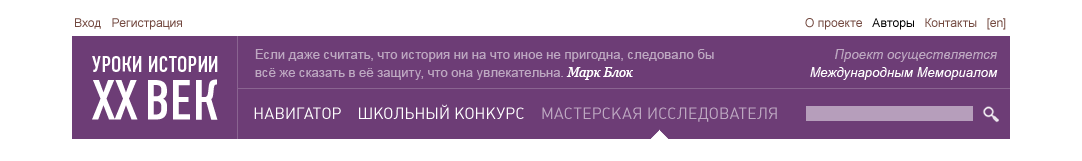
<style>
.page{position:relative;width:1082px;height:161px;background:#6d3d76}
.page>*{position:absolute;margin:0}
.t1{font:12px "ArialMT";color:#734940}
.t2{font:12px "ArialMT";color:#000000}
.t3{font:13px/18px "ArialMT";color:#bda8c1}
.t4{font:13px/18px "Georgia-Italic";color:#bda8c1}
.t5{font:13px "Arial-ItalicMT";color:#bda8c1}
.t6{font:22.2px "DINCondensedC-Regular";color:#ffffff}
.t7{font:13px "Georgia-Italic";color:#ffffff}
.t8{font:13px "Arial-ItalicMT";color:#ffffff}
.t9{font:56.5px "DINCondensedC-Regular";color:#ffffff}
.t10{font:16px "Plumb-Regular";text-transform:uppercase}
</style>
<div class="page">
<p class="t1" style="left:75px;top:18px;width:107px;height:12px">Вход   Регистрация</p>
<p class="t1" style="left:805px;top:18px;width:201px;height:12px">О проекте   <span class="t2">Авторы</span>   Контакты   [en]</p>
<p class="t3" style="left:255px;top:49px;width:459px;height:31px">Если даже считать, что история ни на что иное не пригодна, следовало бы <br>всё же сказать в её защиту, что она увлекательна. <span class="t4">Марк Блок</span></p>
<p class="t5" style="left:835px;top:49px;width:162px;height:13px">Проект осуществляется</p>
<p class="t6" style="left:92px;top:56px;width:126px;height:16px">УРОКИ ИСТОРИИ</p>
<p class="t7" style="left:566px;top:67px;width:67px;height:13px">Марк Блок</p>
<p class="t8" style="left:810px;top:67px;width:188px;height:13px">Международным Мемориалом</p>
<p class="t9" style="left:92px;top:79px;width:126px;height:41px">XX ВЕК</p>
<p class="t10" style="left:254px;top:104px;width:523px;height:18px">Навигатор    Школьный конкурс    Мастерская исследователя</p>
</div>
